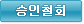
<style>
.page{position:relative;width:84px;height:24px}
.page>*{position:absolute;margin:0}
.t1{font:12px "Gulim";color:#ffffff;font-weight:bold}
</style>
<div class="page">
<p class="t1" style="left:16px;top:5px;width:49px;height:11px">승인철회</p>
</div>
